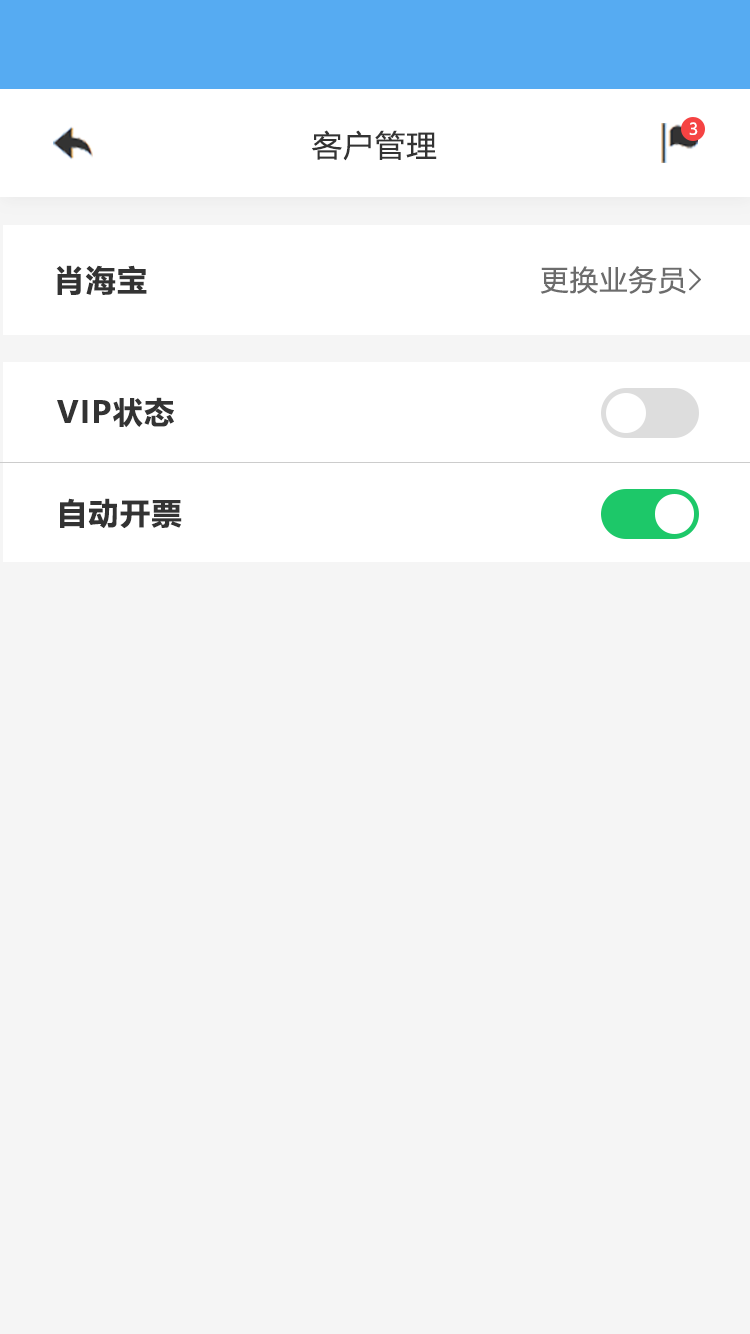
<style>
.page{position:relative;width:750px;height:1334px;background:#f5f5f5}
.page>*{position:absolute;margin:0}
.t1{font:16px "MicrosoftYaHeiUI";color:#ffffff}
.t2{font:30px "MicrosoftYaHeiUI";letter-spacing:0.05em;color:#333333}
.t3{font:30px "MicrosoftYaHeiUI-Bold";letter-spacing:0.05em;color:#333333}
.t4{font:28px "MicrosoftYaHeiUI";letter-spacing:0.05em;color:#6c6c6c}
.t5{font:30px "FangSong";letter-spacing:0.05em;color:#6c6c6c;font-weight:bold}
</style>
<div class="page">
<p class="t1" style="left:689px;top:122px;width:9px;height:13px">3</p>
<p class="t2" style="left:312px;top:130px;width:125px;height:31px">客户管理</p>
<p class="t3" style="left:56px;top:265px;width:91px;height:30px">肖海宝</p>
<p class="t4" style="left:540px;top:266px;width:161px;height:28px">更换业务员<span class="t5">&gt;</span></p>
<p class="t3" style="left:57px;top:397px;width:117px;height:31px">VIP状态</p>
<p class="t3" style="left:60px;top:498px;width:122px;height:31px">自动开票</p>
</div>
